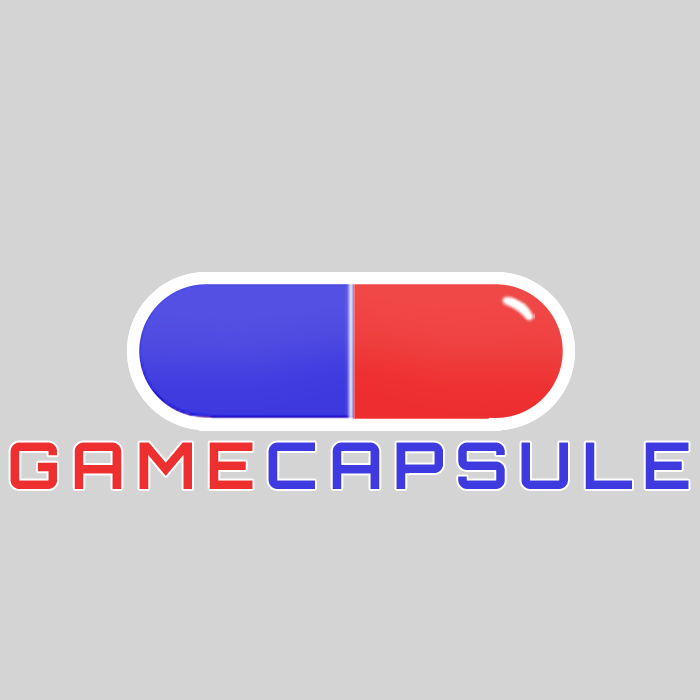
<style>
.page{position:relative;width:700px;height:700px;background:#d4d4d4}
.page>*{position:absolute;margin:0}
.t1{font:64.6px "Orbitron-Bold";letter-spacing:0.16em;color:#ee2f2f}
.t2{font:64.6px "Orbitron-Bold";letter-spacing:0.16em;color:#3e3adf}
</style>
<div class="page">
<p class="t1" style="left:10px;top:442px;width:243px;height:47px">GAME</p>
<p class="t2" style="left:268px;top:442px;width:421px;height:47px">CAPSULE</p>
</div>
